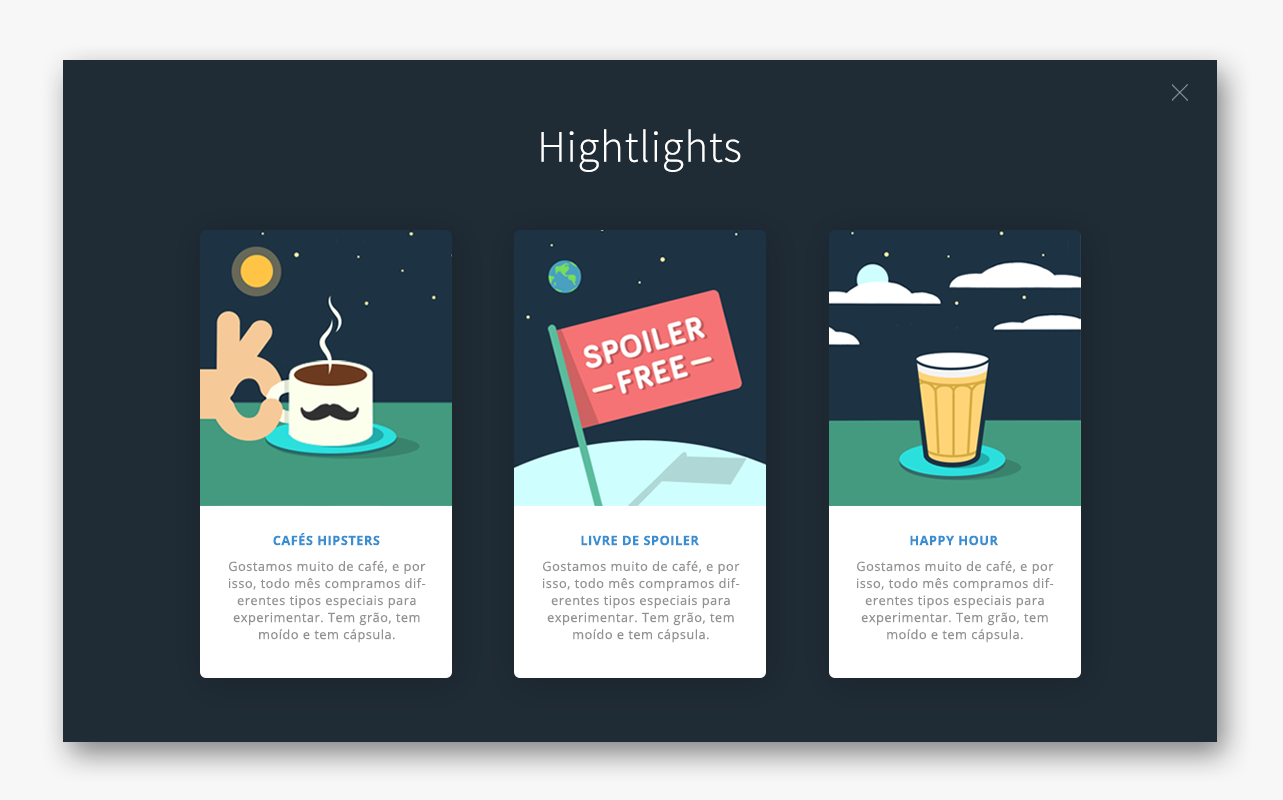
<style>
.page{position:relative;width:1283px;height:800px;background:#1f2b35}
.page>*{position:absolute;margin:0}
.t1{font:44.6px "SourceSansPro-Light";letter-spacing:0.02em;color:#ffffff}
.t2{font:12.8px "OpenSans-Bold";letter-spacing:0.04em;color:#388ed1}
.t3{font:12.8px/17px "OpenSans";letter-spacing:0.04em;color:#939292}
</style>
<div class="page">
<p class="t1" style="left:541px;top:129px;width:200px;height:43px">Hightlights</p>
<p class="t2" style="left:273px;top:533px;width:107px;height:13px">CAFÉS HIPSTERS</p>
<p class="t2" style="left:581px;top:535px;width:118px;height:11px">LIVRE DE SPOILER</p>
<p class="t2" style="left:910px;top:535px;width:88px;height:11px">HAPPY HOUR</p>
<p class="t3" style="left:229px;top:561px;width:197px;height:82px;text-align:center">Gostamos muito de café, e por isso, todo mês compramos diferentes tipos especiais para experimentar. Tem grão, tem moído e tem cápsula.</p>
<p class="t3" style="left:543px;top:561px;width:197px;height:82px;text-align:center">Gostamos muito de café, e por isso, todo mês compramos diferentes tipos especiais para experimentar. Tem grão, tem moído e tem cápsula.</p>
<p class="t3" style="left:857px;top:561px;width:197px;height:82px;text-align:center">Gostamos muito de café, e por isso, todo mês compramos diferentes tipos especiais para experimentar. Tem grão, tem moído e tem cápsula.</p>
</div>
